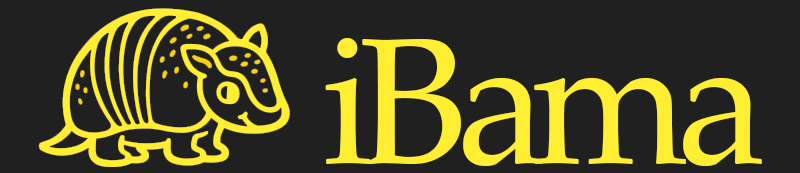
<style>
.page{position:relative;width:800px;height:173px;background:#202020}
.page>*{position:absolute;margin:0}
.t1{font:180px "PalatinoLinotype-Roman";letter-spacing:-0.08em;color:#ffee32}
</style>
<div class="page">
<p class="t1" style="left:325px;top:38px;width:437px;height:128px">iBama</p>
</div>
